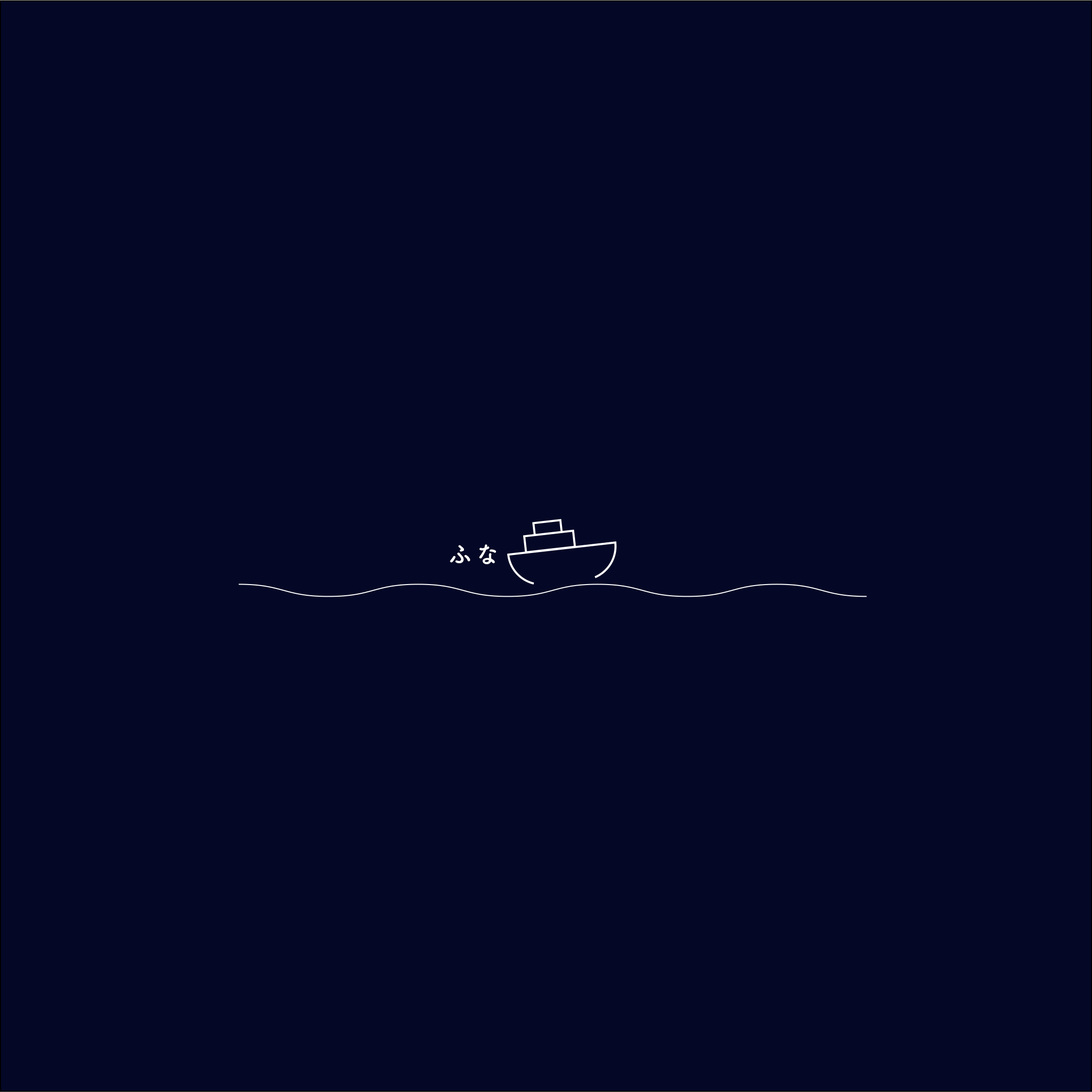
<style>
.page{position:relative;width:1092px;height:1092px;background:#040826}
.page>*{position:absolute;margin:0}
.t1{font:24.3px "TsukuARdGothicStd-B";letter-spacing:0.1em;color:#ffffff}
</style>
<div class="page">
<p class="t1" style="left:450px;top:544px;width:46px;height:20px">ふな</p>
</div>
